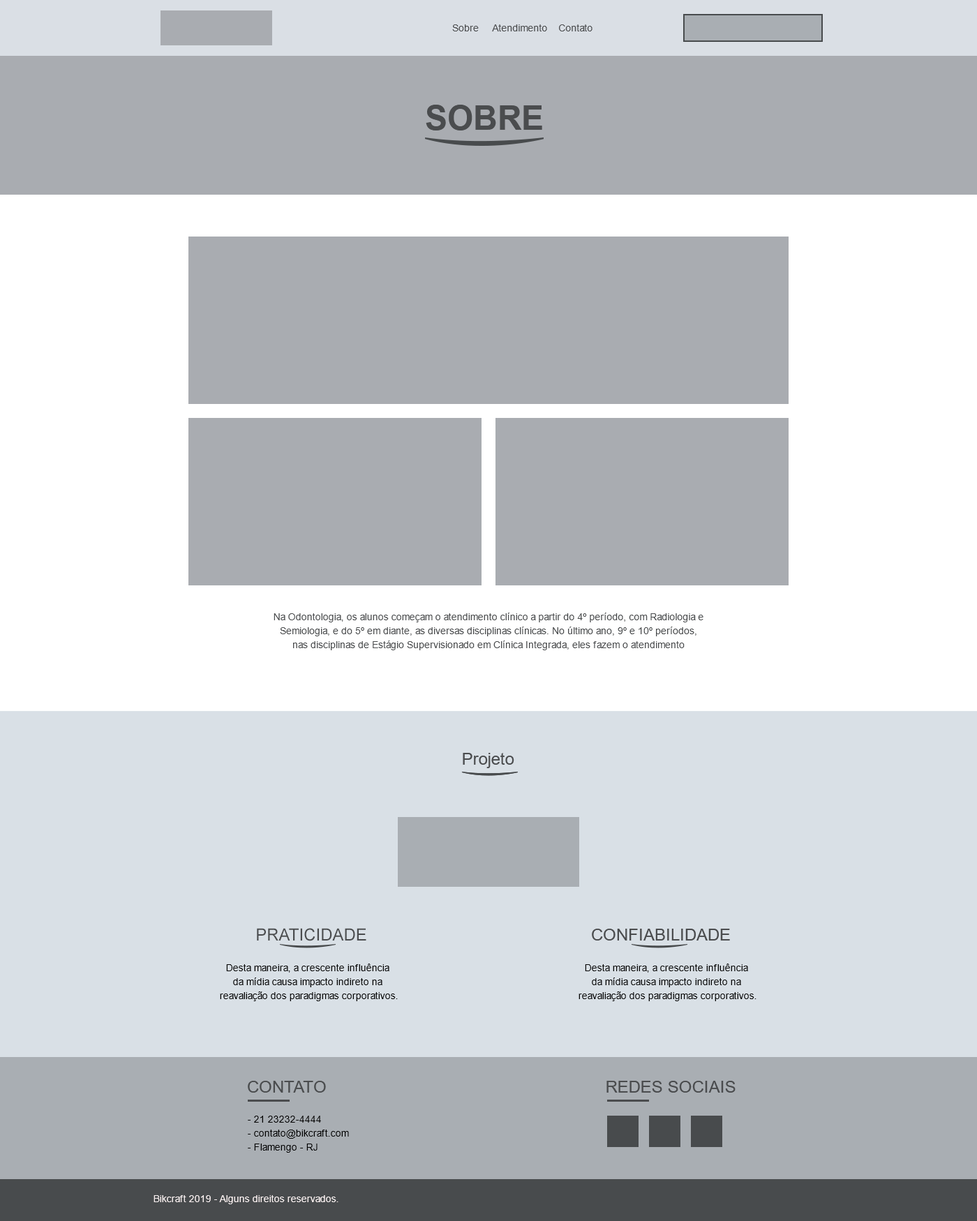
<style>
.page{position:relative;width:977px;height:1221px;background:#a9acb1}
.page>*{position:absolute;margin:0}
.t1{font:9.8px "ArialMT";color:#4a4c4e}
.t2{font:33.5px "Arial-BoldMT";color:#4a4c4e;text-transform:uppercase}
.t3{font:9.8px/14px "ArialMT";color:#4a4c4e}
.t4{font:16.7px "ArialMT";color:#4a4c4e}
.t5{font:9.8px/14px "ArialMT";color:#000000}
.t6{font:9.8px "ArialMT";color:#f9f0f0}
</style>
<div class="page">
<p class="t1" style="left:452px;top:24px;width:140px;height:7px">Sobre     Atendimento    Contato</p>
<p class="t2" style="left:426px;top:105px;width:116px;height:25px">SObre</p>
<p class="t3" style="left:273px;top:613px;width:430px;height:37px;text-align:center">Na Odontologia, os alunos começam o atendimento clínico a partir do 4º período, com Radiologia e Semiologia, e do 5º em diante, as diversas disciplinas clínicas. No último ano, 9º e 10º períodos, nas disciplinas de Estágio Supervisionado em Clínica Integrada, eles fazem o atendimento totalmente integral. Atendemos a população do Distrito Federal e do entorno.</p>
<p class="t4" style="left:463px;top:753px;width:51px;height:15px">Projeto</p>
<p class="t4" style="left:257px;top:928px;width:109px;height:13px">PRATICIDADE</p>
<p class="t4" style="left:592px;top:929px;width:138px;height:11px">CONFIABILIDADE</p>
<p class="t5" style="left:220px;top:963px;width:178px;height:38px;text-align:center">Desta maneira, a crescente influência <br>da mídia causa impacto indireto na <br>reavaliação dos paradigmas corporativos.</p>
<p class="t5" style="left:578px;top:963px;width:178px;height:38px;text-align:center">Desta maneira, a crescente influência <br>da mídia causa impacto indireto na <br>reavaliação dos paradigmas corporativos.</p>
<p class="t4" style="left:248px;top:1081px;width:78px;height:12px">CONTATO</p>
<p class="t4" style="left:606px;top:1081px;width:129px;height:12px">REDES SOCIAIS</p>
<p class="t5" style="left:248px;top:1116px;width:101px;height:37px">- 21 23232-4444<br>- contato@bikcraft.com<br>- Flamengo - RJ</p>
<p class="t6" style="left:153px;top:1195px;width:185px;height:9px">Bikcraft 2019 - Alguns direitos reservados.</p>
</div>
